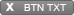
<style>
.page{position:relative;width:74px;height:15px}
.page>*{position:absolute;margin:0}
.t1{font:11px "HelveticaNeue-Heavy";letter-spacing:0.01em;color:#ffffff}
.t2{font:10px "ArialMT";letter-spacing:0.01em;color:#ffffff}
</style>
<div class="page">
<p class="t1" style="left:6px;top:3px;width:8px;height:8px">X</p>
<p class="t2" style="left:24px;top:4px;width:42px;height:7px">BTN TXT</p>
</div>
